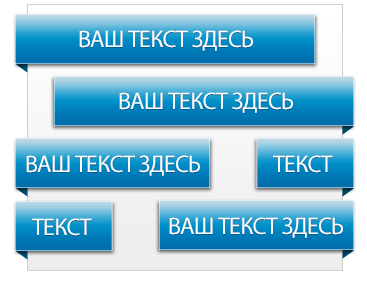
<style>
.page{position:relative;width:367px;height:281px}
.page>*{position:absolute;margin:0}
.t1{font:24px "MyriadPro-Regular";letter-spacing:-0.03em;color:#fefefe;text-transform:uppercase}
</style>
<div class="page">
<p class="t1" style="left:79px;top:30px;width:174px;height:21px">ВАШ ТЕКСТ ЗДЕСЬ</p>
<p class="t1" style="left:119px;top:92px;width:174px;height:21px">ВАШ ТЕКСТ ЗДЕСЬ</p>
<p class="t1" style="left:26px;top:155px;width:174px;height:21px">ВАШ ТЕКСТ ЗДЕСЬ</p>
<p class="t1" style="left:273px;top:155px;width:60px;height:18px">ТЕКСТ</p>
<p class="t1" style="left:32px;top:218px;width:60px;height:18px">ТЕКСТ</p>
<p class="t1" style="left:169px;top:217px;width:174px;height:21px">ВАШ ТЕКСТ ЗДЕСЬ</p>
</div>
